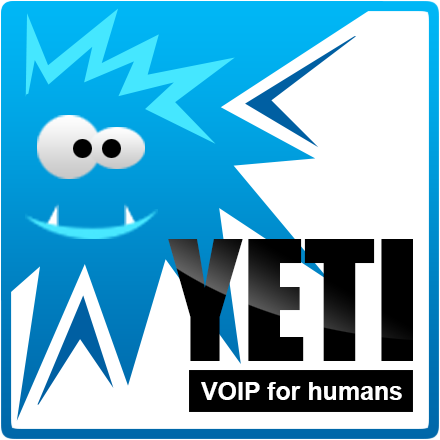
<style>
.page{position:relative;width:440px;height:440px;background:#ffffff}
.page>*{position:absolute;margin:0}
.t1{font:154px "Impact";color:#000000}
.t2{font:25px "Arial-BoldMT";color:#ffffff}
</style>
<div class="page">
<p class="t1" style="left:168px;top:239px;width:245px;height:122px">YETI</p>
<p class="t2" style="left:201px;top:382px;width:201px;height:18px">VOIP for humans</p>
</div>
